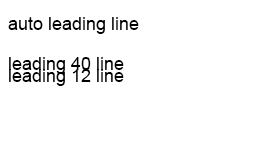
<style>
.page{position:relative;width:256px;height:160px;background:#ffffff}
.page>*{position:absolute;margin:0}
.t1{font:18px "ArialMT";color:#000000}
.t2{font:18px/40px "ArialMT";color:#000000}
.t3{font:18px/12px "ArialMT";color:#000000}
</style>
<div class="page">
<p class="t1" style="left:8px;top:17px;width:131px;height:69px">auto leading line<br><span class="t2">leading 40 line<br></span><span class="t3">leading 12 line</span></p>
</div>
